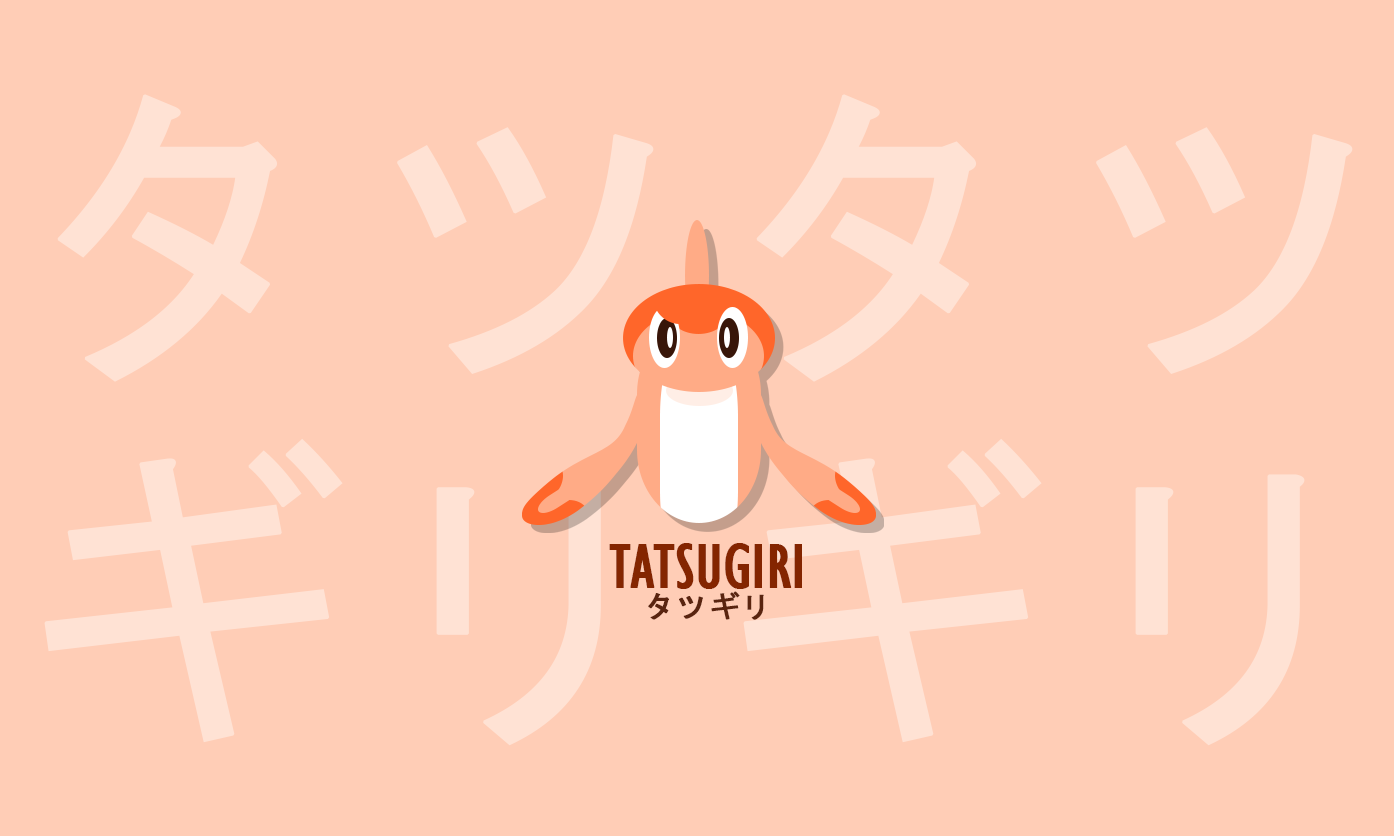
<style>
.page{position:relative;width:1394px;height:836px;background:#ffcdb6}
.page>*{position:absolute;margin:0}
.t1{font:327.8px "MS-Gothic";color:#ffe2d4;font-weight:bold}
.t2{font:65.2px "GillSansMT-Condensed";color:#842500;font-weight:bold}
.t3{font:30.3px "MS-Gothic";color:#5a240f;font-weight:bold}
</style>
<div class="page">
<p class="t1" style="left:57px;top:94px;width:597px;height:288px">タツ</p>
<p class="t1" style="left:756px;top:94px;width:597px;height:288px">タツ</p>
<p class="t1" style="left:44px;top:438px;width:562px;height:308px">ギリ</p>
<p class="t1" style="left:743px;top:438px;width:562px;height:308px">ギリ</p>
<p class="t2" style="left:609px;top:543px;width:193px;height:46px">TATSUGIRI</p>
<p class="t3" style="left:648px;top:593px;width:55px;height:27px">タツ</p>
<p class="t3" style="left:711px;top:591px;width:53px;height:29px">ギリ</p>
</div>
